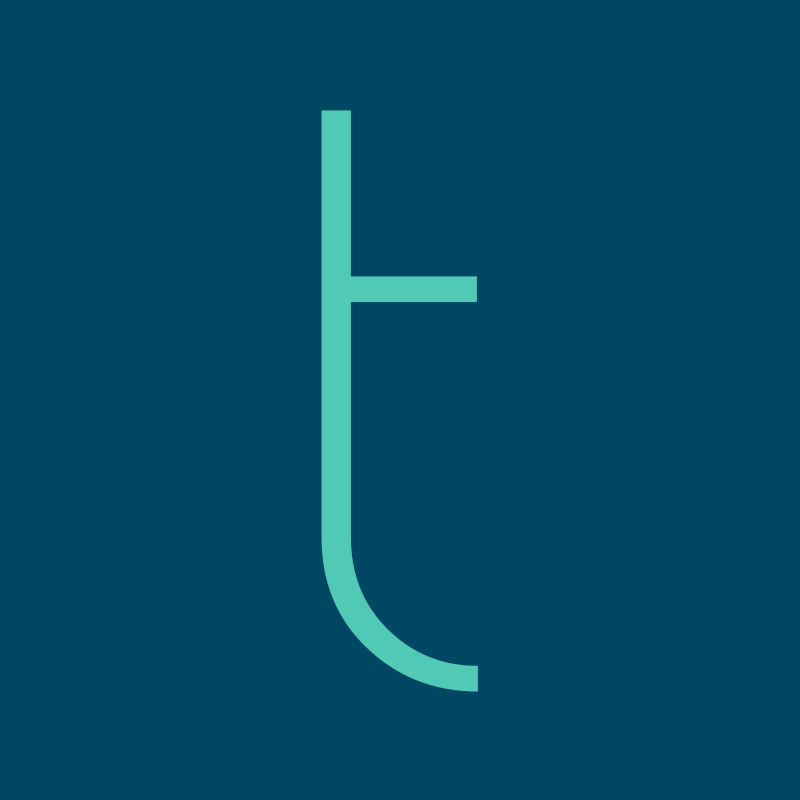
<style>
.page{position:relative;width:800px;height:800px;background:#004764}
.page>*{position:absolute;margin:0}
.t1{font:912.3px "PoiretOne-Regular";color:#50c9b5}
</style>
<div class="page">
<p class="t1" style="left:321px;top:110px;width:157px;height:582px">t</p>
</div>
